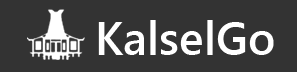
<style>
.page{position:relative;width:297px;height:72px;background:#333333}
.page>*{position:absolute;margin:0}
.t1{font:46px "SegoeUI-Semibold";color:#fffefe}
</style>
<div class="page">
<p class="t1" style="left:98px;top:20px;width:176px;height:35px">KalselGo</p>
</div>
